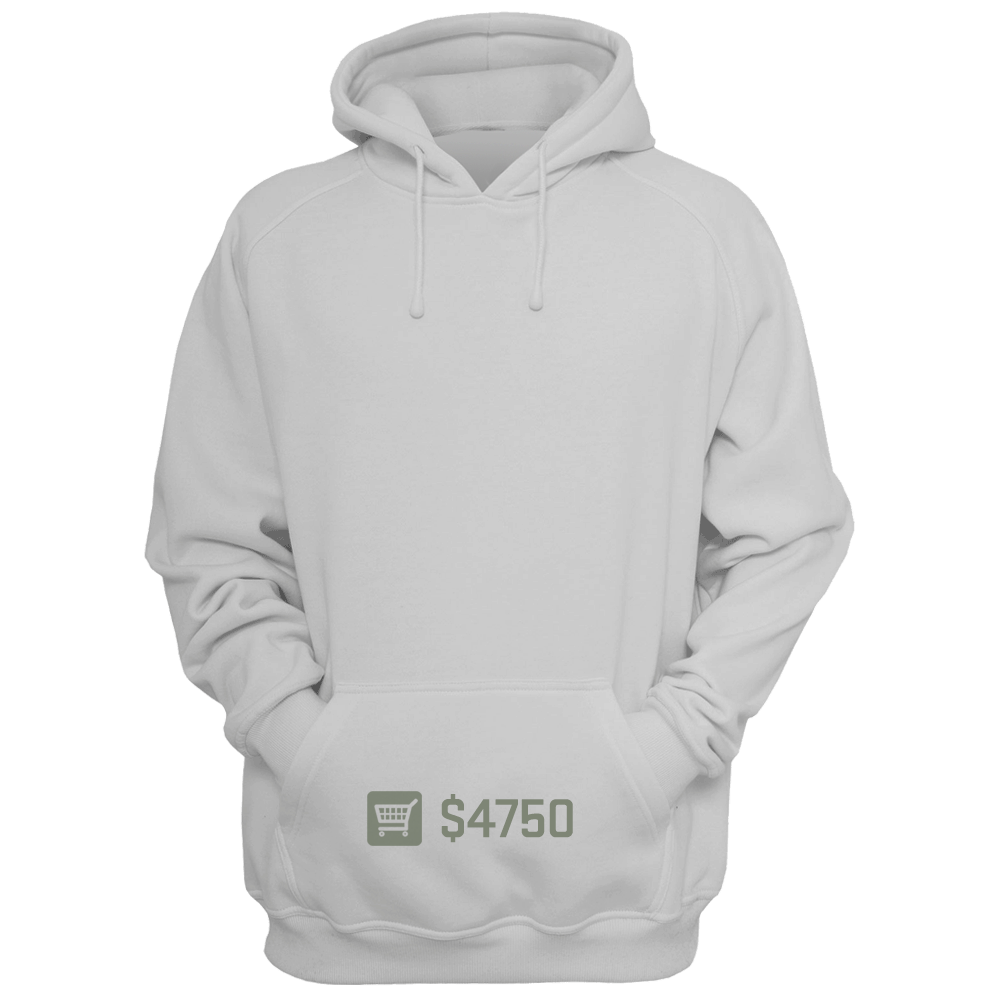
<style>
.page{position:relative;width:1000px;height:1000px;background:#ffffff}
.page>*{position:absolute;margin:0}
.t1{font:56px "Stratum2-Medium";letter-spacing:-0.05em;color:#7e8575;font-weight:bold}
</style>
<div class="page">
<p class="t1" style="left:441px;top:794px;width:132px;height:49px">$4750</p>
</div>
